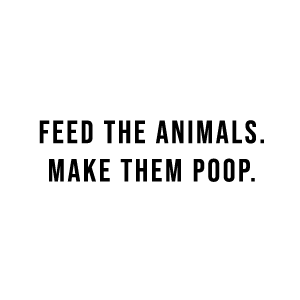
<style>
.page{position:relative;width:300px;height:300px;background:#ffffff}
.page>*{position:absolute;margin:0}
.t1{font:32px "BebasNeue-Regular";letter-spacing:0.08em;color:#000000}
</style>
<div class="page">
<p class="t1" style="left:39px;top:120px;width:225px;height:62px;text-align:center">FEED THE ANIMALS.<br>MAKE THEM POOP.</p>
</div>
